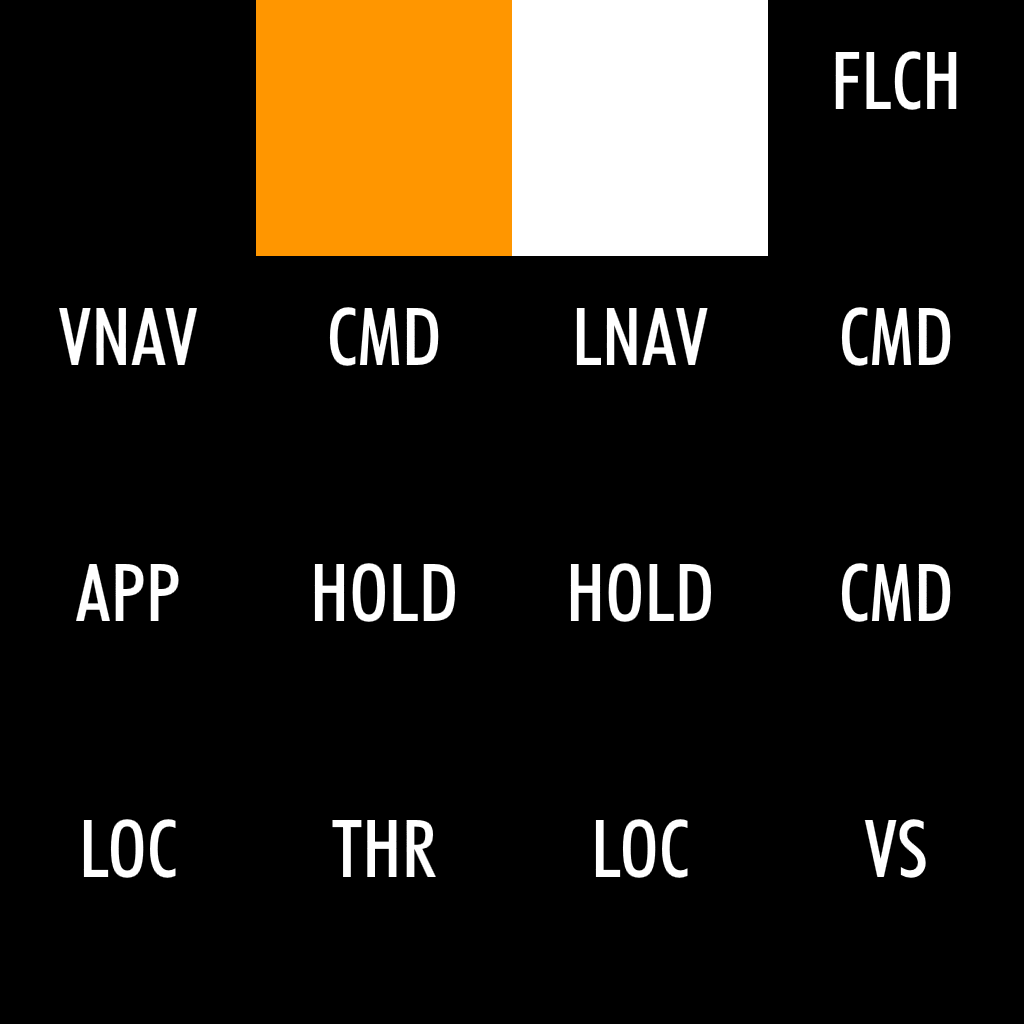
<style>
.page{position:relative;width:1024px;height:1024px;background:#000000}
.page>*{position:absolute;margin:0}
.t1{font:80px "FuturaBT-MediumCondensed";color:#ffffff}
</style>
<div class="page">
<p class="t1" style="left:835px;top:51px;width:122px;height:59px">FLCH</p>
<p class="t1" style="left:59px;top:307px;width:138px;height:58px">VNAV</p>
<p class="t1" style="left:329px;top:307px;width:110px;height:59px">CMD</p>
<p class="t1" style="left:576px;top:307px;width:132px;height:58px">LNAV</p>
<p class="t1" style="left:841px;top:307px;width:110px;height:59px">CMD</p>
<p class="t1" style="left:76px;top:563px;width:103px;height:58px">APP</p>
<p class="t1" style="left:314px;top:563px;width:141px;height:59px">HOLD</p>
<p class="t1" style="left:570px;top:563px;width:141px;height:59px">HOLD</p>
<p class="t1" style="left:841px;top:563px;width:110px;height:59px">CMD</p>
<p class="t1" style="left:83px;top:819px;width:93px;height:59px">LOC</p>
<p class="t1" style="left:332px;top:819px;width:104px;height:58px">THR</p>
<p class="t1" style="left:595px;top:819px;width:93px;height:59px">LOC</p>
<p class="t1" style="left:864px;top:819px;width:62px;height:59px">VS</p>
</div>
